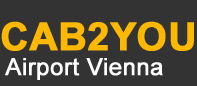
<style>
.page{position:relative;width:197px;height:86px;background:#333333}
.page>*{position:absolute;margin:0}
.t1{font:38.7px "Arial-BoldMT";color:#feb800;font-weight:bold}
.t2{font:23.7px "ArialMT";color:#ffffff;font-weight:bold}
</style>
<div class="page">
<p class="t1" style="left:1px;top:21px;width:193px;height:30px">CAB2YOU</p>
<p class="t2" style="left:5px;top:58px;width:158px;height:22px">Airport Vienna</p>
</div>
